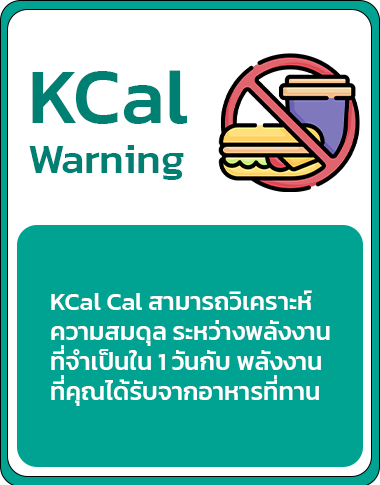
<style>
.page{position:relative;width:380px;height:485px;background:#00a291}
.page>*{position:absolute;margin:0}
.t1{font:41.7px "Kanit-Medium";color:#008073}
.t2{font:79.2px "Kanit-Medium";color:#008073}
.t3{font:25px "Kanit-Medium";color:#ffffff}
</style>
<div class="page">
<p class="t1" style="left:29px;top:70px;width:158px;height:110px"><span class="t2">KCal<br></span>Warning</p>
<p class="t3" style="left:51px;top:290px;width:279px;height:116px">KCal Cal สามารถวิเคราะห์<br>ความสมดุล ระหว่างพลังงาน<br>ที่จำเป็นใน 1 วันกับ พลังงาน <br>ที่คุณได้รับจากอาหารที่ทาน</p>
</div>
